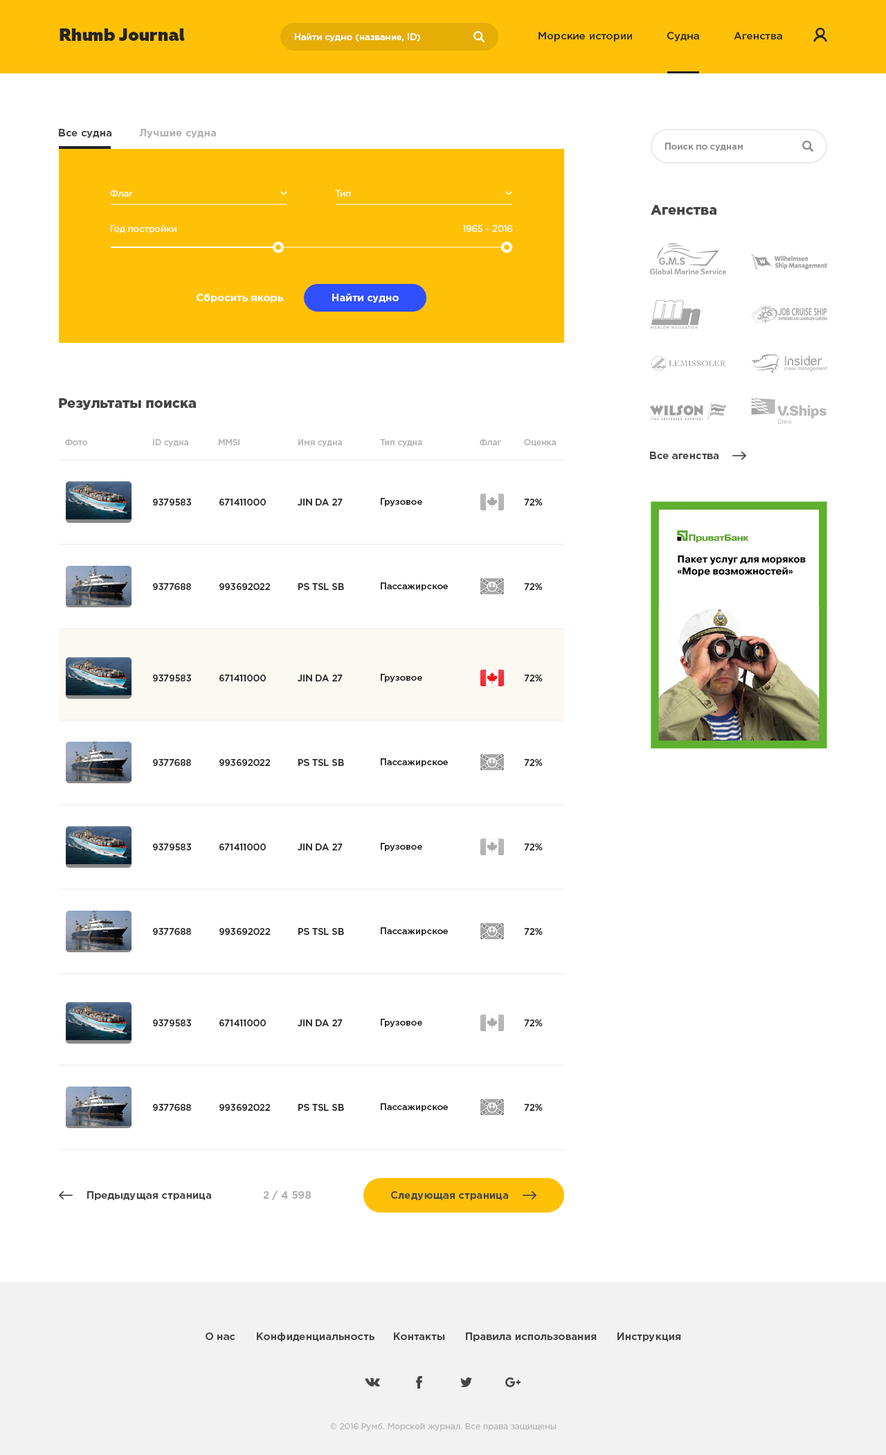
<style>
.page{position:relative;width:886px;height:1455px;background:#ffffff}
.page>*{position:absolute;margin:0}
.t1{font:17.3px "Geometria-Heavy";color:#252525}
.t2{font:9px "GothamPro-Medium";color:#ffffff}
.t3{font:10.4px "GothamPro-Medium";color:#252525}
.t4{font:10.4px "GothamPro-Bold";color:#464646}
.t5{font:10.4px "GothamPro-Bold";color:#b2b2b2}
.t6{font:9px "GothamPro-Medium";color:#898989}
.t7{font:9px "GothamPro";color:#ffffff}
.t8{font:13.8px "GothamPro-Black";color:#464646}
.t9{font:10.4px "GothamPro-Bold";color:#ffffff}
.t10{font:8.3px "GothamPro-Medium";color:#b4b4b4}
.t11{font:9px "GothamPro-Medium";color:#252525}
.t12{font:8.3px "GothamPro";color:#b4b4b4}
</style>
<div class="page">
<p class="t1" style="left:60px;top:28px;width:125px;height:13px">Rhumb Journal</p>
<p class="t2" style="left:295px;top:33px;width:125px;height:9px">Найти судно (название, ID)</p>
<p class="t3" style="left:539px;top:32px;width:93px;height:10px">Морские истории</p>
<p class="t3" style="left:667px;top:32px;width:32px;height:10px">Судна</p>
<p class="t3" style="left:734px;top:32px;width:48px;height:7px">Агенства</p>
<p class="t4" style="left:59px;top:129px;width:52px;height:9px">Все судна</p>
<p class="t5" style="left:139px;top:129px;width:77px;height:9px">Лучшие судна</p>
<p class="t6" style="left:665px;top:143px;width:78px;height:8px">Поиск по суднам</p>
<p class="t7" style="left:110px;top:190px;width:23px;height:7px">Флаг</p>
<p class="t7" style="left:335px;top:190px;width:16px;height:7px">Тип</p>
<p class="t8" style="left:651px;top:205px;width:66px;height:10px">Агенства</p>
<p class="t7" style="left:111px;top:225px;width:66px;height:8px">Год постройки</p>
<p class="t7" style="left:462px;top:225px;width:51px;height:7px">1965 - 2016</p>
<p class="t9" style="left:197px;top:294px;width:86px;height:9px">Сбросить якорь</p>
<p class="t9" style="left:332px;top:294px;width:67px;height:9px">Найти судно</p>
<p class="t8" style="left:59px;top:398px;width:137px;height:12px">Результаты поиска</p>
<p class="t10" style="left:65px;top:439px;width:22px;height:6px">Фото</p>
<p class="t10" style="left:153px;top:439px;width:35px;height:8px">ID судна</p>
<p class="t10" style="left:219px;top:439px;width:21px;height:6px">MMSI</p>
<p class="t10" style="left:298px;top:439px;width:44px;height:8px">Имя судна</p>
<p class="t10" style="left:380px;top:439px;width:42px;height:8px">Тип судна</p>
<p class="t10" style="left:480px;top:439px;width:21px;height:6px">Флаг</p>
<p class="t10" style="left:524px;top:439px;width:32px;height:8px">Оценка</p>
<p class="t4" style="left:650px;top:451px;width:69px;height:8px">Все агенства</p>
<p class="t11" style="left:381px;top:498px;width:41px;height:8px">Грузовое</p>
<p class="t11" style="left:153px;top:498px;width:38px;height:7px">9379583</p>
<p class="t11" style="left:219px;top:498px;width:47px;height:7px">671411000</p>
<p class="t11" style="left:297px;top:498px;width:46px;height:7px">JIN DA 27</p>
<p class="t11" style="left:524px;top:498px;width:19px;height:7px">72%</p>
<p class="t11" style="left:153px;top:583px;width:38px;height:7px">9377688</p>
<p class="t11" style="left:219px;top:583px;width:52px;height:7px">993692022</p>
<p class="t11" style="left:298px;top:583px;width:46px;height:7px">PS TSL SB</p>
<p class="t11" style="left:381px;top:582px;width:67px;height:9px">Пассажирское</p>
<p class="t11" style="left:524px;top:583px;width:19px;height:7px">72%</p>
<p class="t11" style="left:153px;top:674px;width:38px;height:7px">9379583</p>
<p class="t11" style="left:219px;top:674px;width:47px;height:7px">671411000</p>
<p class="t11" style="left:297px;top:674px;width:46px;height:7px">JIN DA 27</p>
<p class="t11" style="left:381px;top:674px;width:41px;height:8px">Грузовое</p>
<p class="t11" style="left:524px;top:674px;width:19px;height:7px">72%</p>
<p class="t11" style="left:153px;top:759px;width:38px;height:7px">9377688</p>
<p class="t11" style="left:219px;top:759px;width:52px;height:7px">993692022</p>
<p class="t11" style="left:298px;top:759px;width:46px;height:7px">PS TSL SB</p>
<p class="t11" style="left:381px;top:758px;width:67px;height:8px">Пассажирское</p>
<p class="t11" style="left:524px;top:759px;width:19px;height:7px">72%</p>
<p class="t11" style="left:153px;top:843px;width:38px;height:7px">9379583</p>
<p class="t11" style="left:219px;top:843px;width:47px;height:7px">671411000</p>
<p class="t11" style="left:297px;top:843px;width:46px;height:7px">JIN DA 27</p>
<p class="t11" style="left:381px;top:843px;width:41px;height:8px">Грузовое</p>
<p class="t11" style="left:524px;top:843px;width:19px;height:7px">72%</p>
<p class="t11" style="left:153px;top:928px;width:38px;height:7px">9377688</p>
<p class="t11" style="left:219px;top:928px;width:52px;height:7px">993692022</p>
<p class="t11" style="left:298px;top:928px;width:46px;height:7px">PS TSL SB</p>
<p class="t11" style="left:381px;top:927px;width:67px;height:8px">Пассажирское</p>
<p class="t11" style="left:524px;top:928px;width:19px;height:7px">72%</p>
<p class="t11" style="left:153px;top:1019px;width:38px;height:7px">9379583</p>
<p class="t11" style="left:219px;top:1019px;width:47px;height:7px">671411000</p>
<p class="t11" style="left:297px;top:1019px;width:46px;height:7px">JIN DA 27</p>
<p class="t11" style="left:381px;top:1018px;width:41px;height:9px">Грузовое</p>
<p class="t11" style="left:524px;top:1019px;width:19px;height:7px">72%</p>
<p class="t11" style="left:153px;top:1104px;width:38px;height:6px">9377688</p>
<p class="t11" style="left:219px;top:1104px;width:52px;height:6px">993692022</p>
<p class="t11" style="left:298px;top:1104px;width:46px;height:6px">PS TSL SB</p>
<p class="t11" style="left:381px;top:1103px;width:67px;height:8px">Пассажирское</p>
<p class="t11" style="left:524px;top:1104px;width:19px;height:6px">72%</p>
<p class="t4" style="left:87px;top:1191px;width:124px;height:9px">Предыдущая страница</p>
<p class="t5" style="left:263px;top:1190px;width:49px;height:10px">2 / 4 598</p>
<p class="t4" style="left:391px;top:1191px;width:117px;height:9px">Следующая страница</p>
<p class="t4" style="left:206px;top:1332px;width:29px;height:8px">О нас</p>
<p class="t4" style="left:257px;top:1332px;width:118px;height:9px">Конфиденциальность</p>
<p class="t4" style="left:394px;top:1332px;width:51px;height:8px">Контакты</p>
<p class="t4" style="left:466px;top:1332px;width:131px;height:9px">Правила использования</p>
<p class="t4" style="left:618px;top:1332px;width:63px;height:9px">Инструкция</p>
<p class="t12" style="left:330px;top:1423px;width:227px;height:8px">© 2016 Румб. Морской журнал. Все права защищены</p>
</div>
